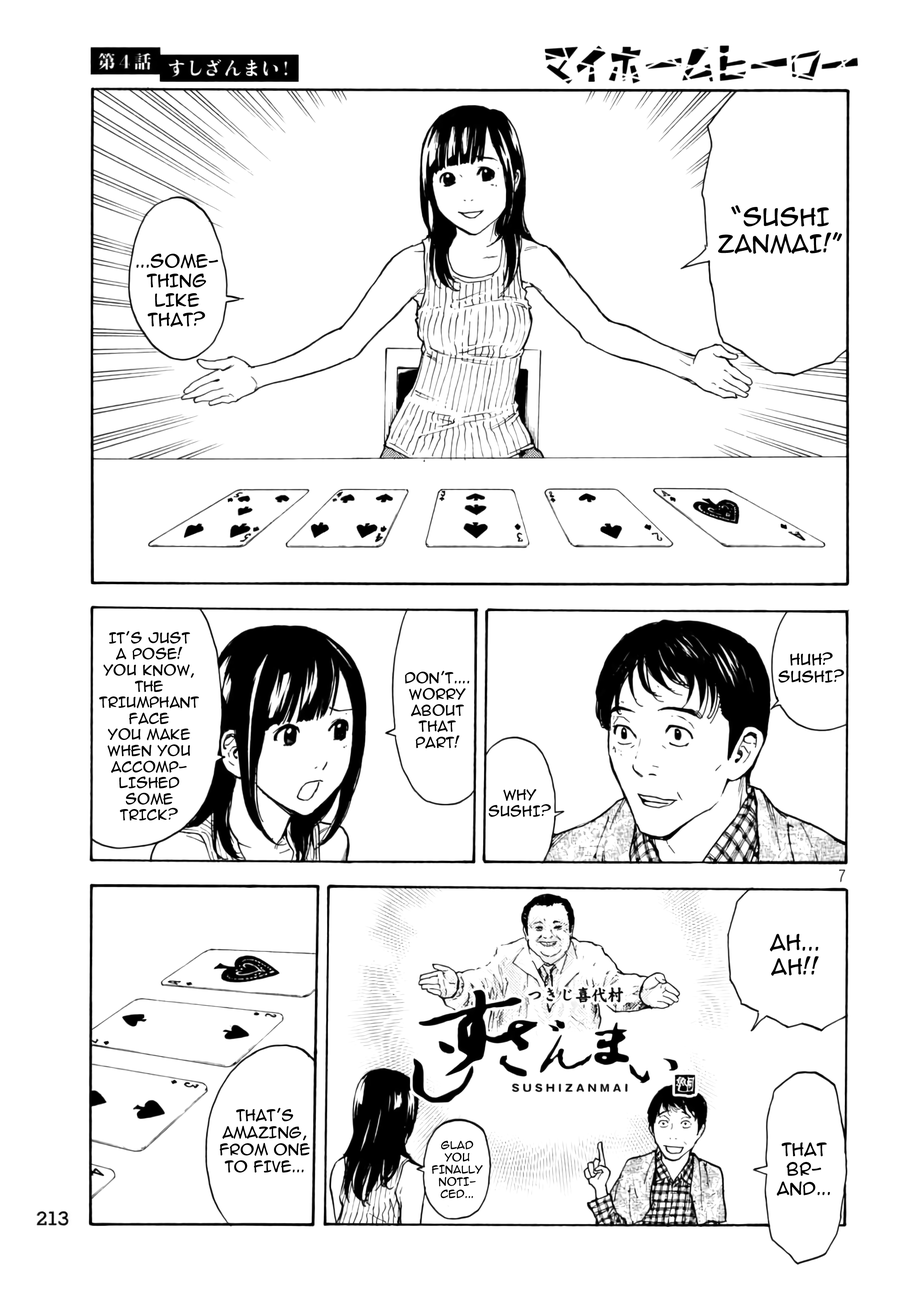
<style>
.page{position:relative;width:916px;height:1301px;background:#ffffff}
.page>*{position:absolute;margin:0}
.t1{font:22.4px "AnimeAce2.0BB";color:#000000;text-transform:uppercase}
.t2{font:16.3px "AnimeAce2.0BB";color:#000000;text-transform:uppercase}
.t3{font:13.4px "AnimeAce2.0BB";color:#000000;text-transform:uppercase}
.t4{font:14.2px "AnimeAce2.0BB";color:#000000;text-transform:uppercase}
.t5{font:20.3px "AnimeAce2.0BB";color:#000000;text-transform:uppercase}
.t6{font:10.2px "AnimeAce2.0BB";color:#000000;text-transform:uppercase}
</style>
<div class="page">
<p class="t1" style="left:718px;top:205px;width:124px;height:49px;text-align:center">“Sushi Zanmai!”</p>
<p class="t2" style="left:137px;top:254px;width:81px;height:73px;text-align:center">...some-<br>thing like that?</p>
<p class="t3" style="left:99px;top:631px;width:100px;height:190px;text-align:center">It’s just <br>a pose! <br>You know, the triumphant face <br>you make when you accomp-<br>lished <br>some <br>trick?</p>
<p class="t4" style="left:779px;top:652px;width:66px;height:31px;text-align:center">Huh? Sushi?</p>
<p class="t3" style="left:405px;top:671px;width:65px;height:78px;text-align:center">Don’t.... worry about that part!</p>
<p class="t3" style="left:489px;top:789px;width:62px;height:28px;text-align:center">Why sushi?</p>
<p class="t5" style="left:770px;top:934px;width:49px;height:42px;text-align:center">Ah... <br>Ah!!</p>
<p class="t4" style="left:220px;top:1108px;width:90px;height:65px;text-align:center">That’s amazing, from one to five...</p>
<p class="t6" style="left:432px;top:1141px;width:51px;height:57px;text-align:center">Glad <br>you finally noti-<br>ced...</p>
<p class="t2" style="left:777px;top:1143px;width:54px;height:53px;text-align:center">That br-<br>and...</p>
</div>
